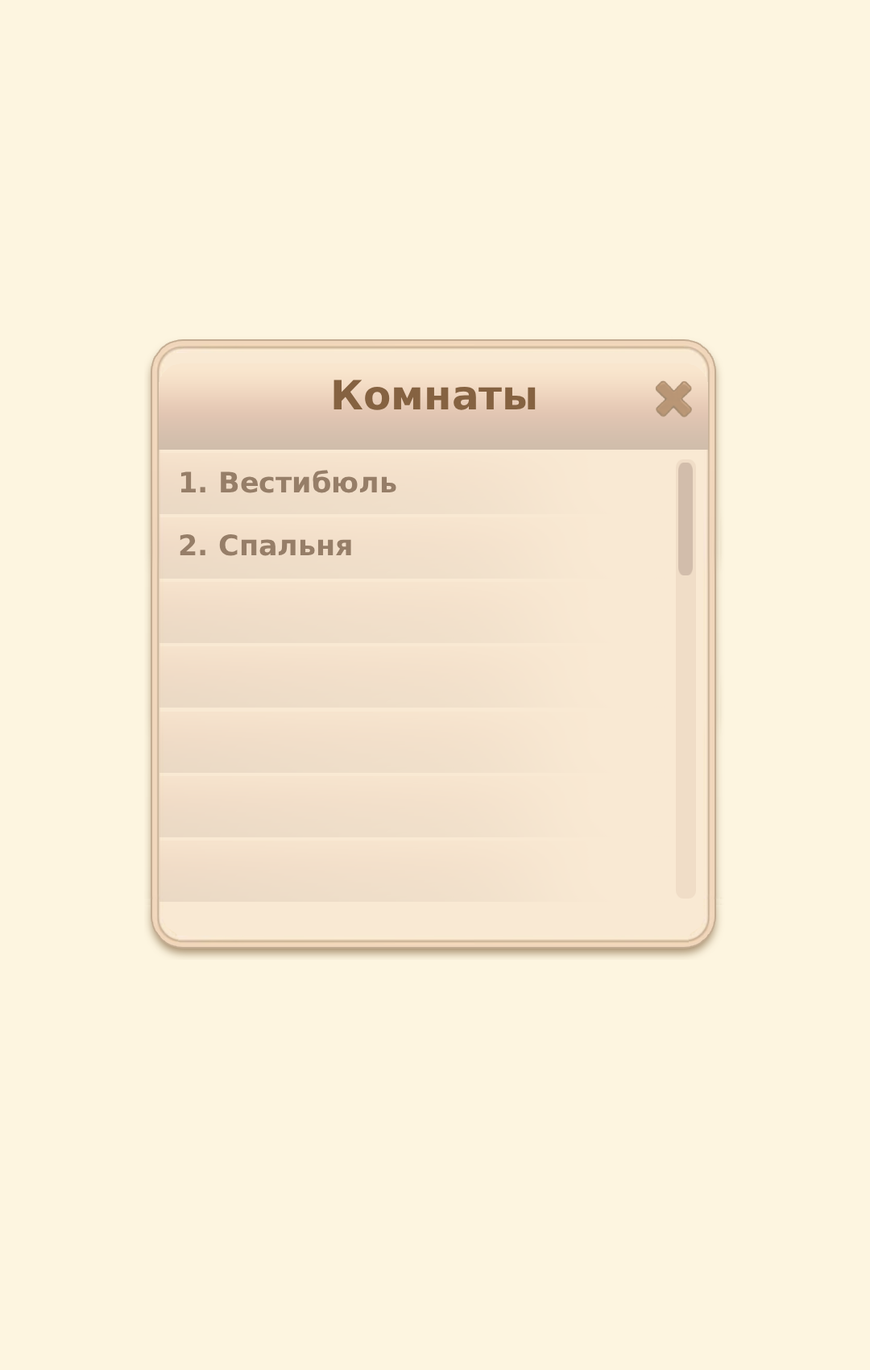
<style>
.page{position:relative;width:870px;height:1370px;background:#fdf5e0}
.page>*{position:absolute;margin:0}
.t1{font:40.3px "DejaVuSans-Bold";color:#856241}
.t2{font:28.2px "DejaVuSans-Bold";color:#967e68}
</style>
<div class="page">
<p class="t1" style="left:334px;top:380px;width:202px;height:30px">Комнаты</p>
<p class="t2" style="left:181px;top:470px;width:216px;height:23px">1. Вестибюль</p>
<p class="t2" style="left:180px;top:534px;width:171px;height:22px">2. Спальня</p>
</div>
